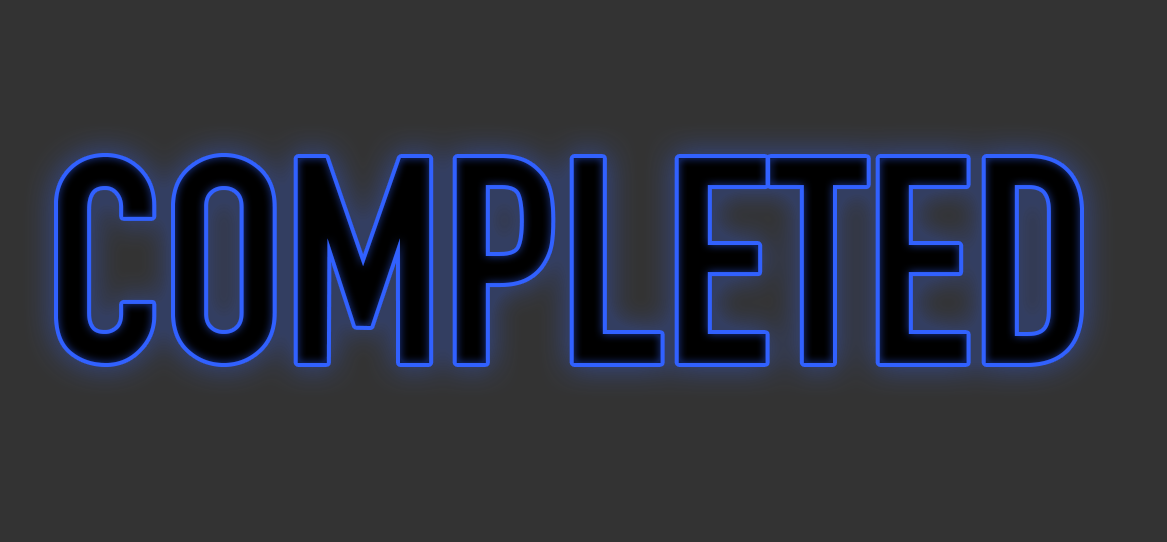
<style>
.page{position:relative;width:1167px;height:542px;background:#333333}
.page>*{position:absolute;margin:0}
.t1{font:285.8px "DINEngschrift";color:#010205}
</style>
<div class="page">
<p class="t1" style="left:58px;top:157px;width:1022px;height:206px">COMPLETED</p>
</div>
